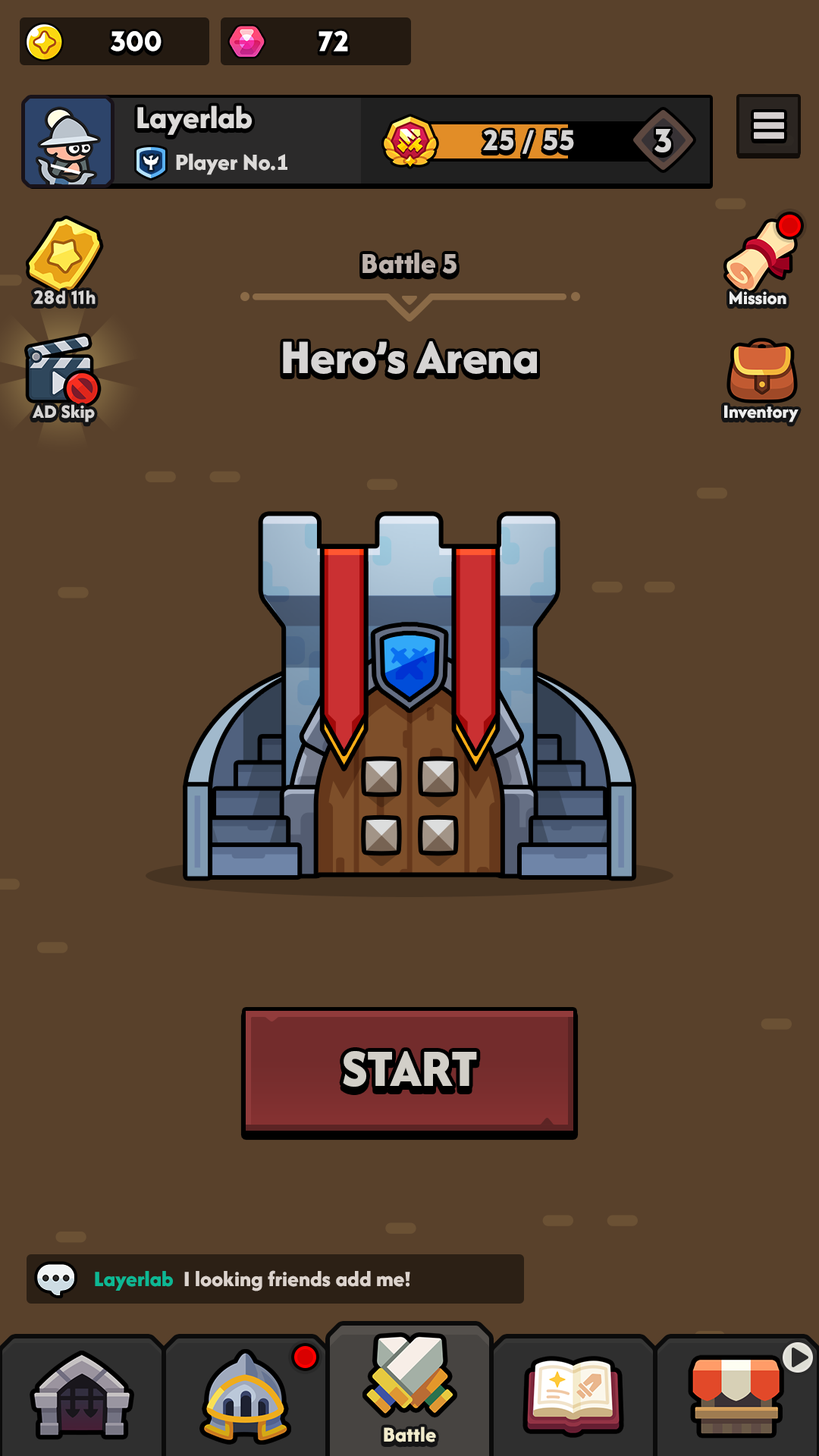
<style>
.page{position:relative;width:819px;height:1456px;background:#59412b}
.page>*{position:absolute;margin:0}
.t1{font:29.6px "LTAvocado-Bold";color:#ffffff}
.t2{font:33.4px "AfacadFlux-ExtraBold";color:#dcdad8}
.t3{font:29.6px "LTAvocado-Bold";color:#d6d4d3;text-transform:uppercase}
.t4{font:34.9px "LTAvocado-Bold";color:#d6d4d3;text-transform:uppercase}
.t5{font:24.3px "AfacadFlux-ExtraBold";color:#dcdad8}
.t6{font:30.3px "AfacadFlux-ExtraBold";color:#bdb2ac}
.t7{font:19.7px "LTAvocado-Bold";color:#d6d4d3}
.t8{font:19.7px "AfacadFlux-ExtraBold";color:#ececec}
.t9{font:50px "AfacadFlux-ExtraBold";color:#d6d4d3}
.t10{font:19.7px "AfacadFlux-ExtraBold";color:#d6d4d3}
.t11{font:54.6px "AfacadFlux-ExtraBold";color:#d2cfc8;text-transform:uppercase}
.t12{font:22.7px "AfacadFlux-ExtraBold";letter-spacing:0.005em;color:#dcd3cd}
.t13{font:22.7px "AfacadFlux-ExtraBold";letter-spacing:0.005em;color:#0db894}
.t14{font:22px "AfacadFlux-ExtraBold";color:#f1ebcc}
</style>
<div class="page">
<p class="t1" style="left:111px;top:31px;width:51px;height:21px">300</p>
<p class="t1" style="left:318px;top:30px;width:30px;height:22px">72</p>
<p class="t2" style="left:137px;top:105px;width:115px;height:30px">Layerlab</p>
<p class="t3" style="left:483px;top:130px;width:91px;height:24px">25 / 55</p>
<p class="t4" style="left:654px;top:129px;width:17px;height:23px">3</p>
<p class="t5" style="left:176px;top:153px;width:111px;height:22px">Player No.1</p>
<p class="t6" style="left:362px;top:253px;width:95px;height:21px">Battle 5</p>
<p class="t7" style="left:33px;top:290px;width:63px;height:14px">28d 11h</p>
<p class="t8" style="left:730px;top:291px;width:56px;height:14px">Mission</p>
<p class="t9" style="left:283px;top:341px;width:254px;height:33px">Hero’s Arena</p>
<p class="t10" style="left:33px;top:404px;width:62px;height:18px">AD Skip</p>
<p class="t8" style="left:724px;top:405px;width:75px;height:17px">Inventory</p>
<p class="t11" style="left:343px;top:1051px;width:134px;height:36px">Start</p>
<p class="t12" style="left:95px;top:1270px;width:315px;height:21px"><span class="t13">Layerlab  </span>I looking friends add me!</p>
<p class="t14" style="left:384px;top:1426px;width:52px;height:16px">Battle</p>
</div>
